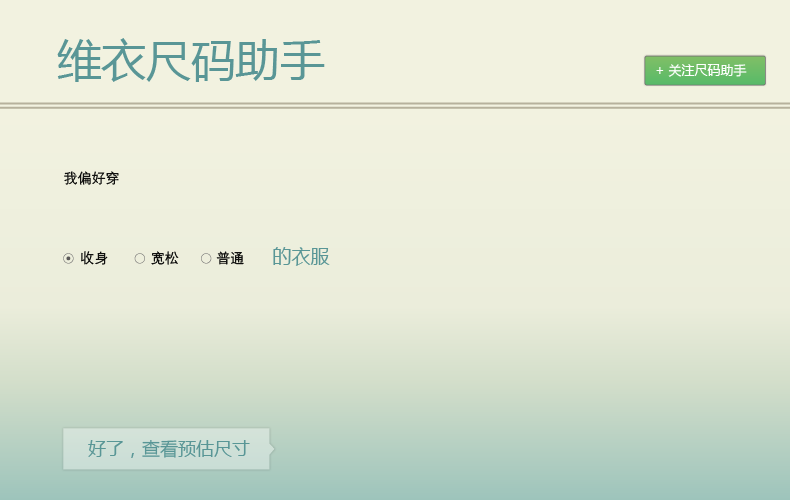
<style>
.page{position:relative;width:790px;height:500px;background:#f2f2e0}
.page>*{position:absolute;margin:0}
.t1{font:44.7px "MicrosoftYaHei";color:#599696}
.t2{font:13px "MicrosoftYaHei";color:#ffffff}
.t3{font:14px "FZZDXJW--GB1-0";color:#000000}
.t4{font:19px "MicrosoftYaHei";color:#599696}
.t5{font:18px "MicrosoftYaHei";color:#599696}
</style>
<div class="page">
<p class="t1" style="left:57px;top:38px;width:268px;height:44px">维衣尺码助手</p>
<p class="t2" style="left:656px;top:64px;width:91px;height:13px">+ 关注尺码助手</p>
<p class="t3" style="left:64px;top:171px;width:55px;height:14px">我偏好穿</p>
<p class="t3" style="left:81px;top:251px;width:27px;height:14px">收身</p>
<p class="t3" style="left:151px;top:251px;width:28px;height:14px">宽松</p>
<p class="t3" style="left:216px;top:251px;width:28px;height:14px">普通</p>
<p class="t4" style="left:273px;top:247px;width:57px;height:19px">的衣服</p>
<p class="t5" style="left:88px;top:440px;width:162px;height:18px">好了，查看预估尺寸</p>
</div>
